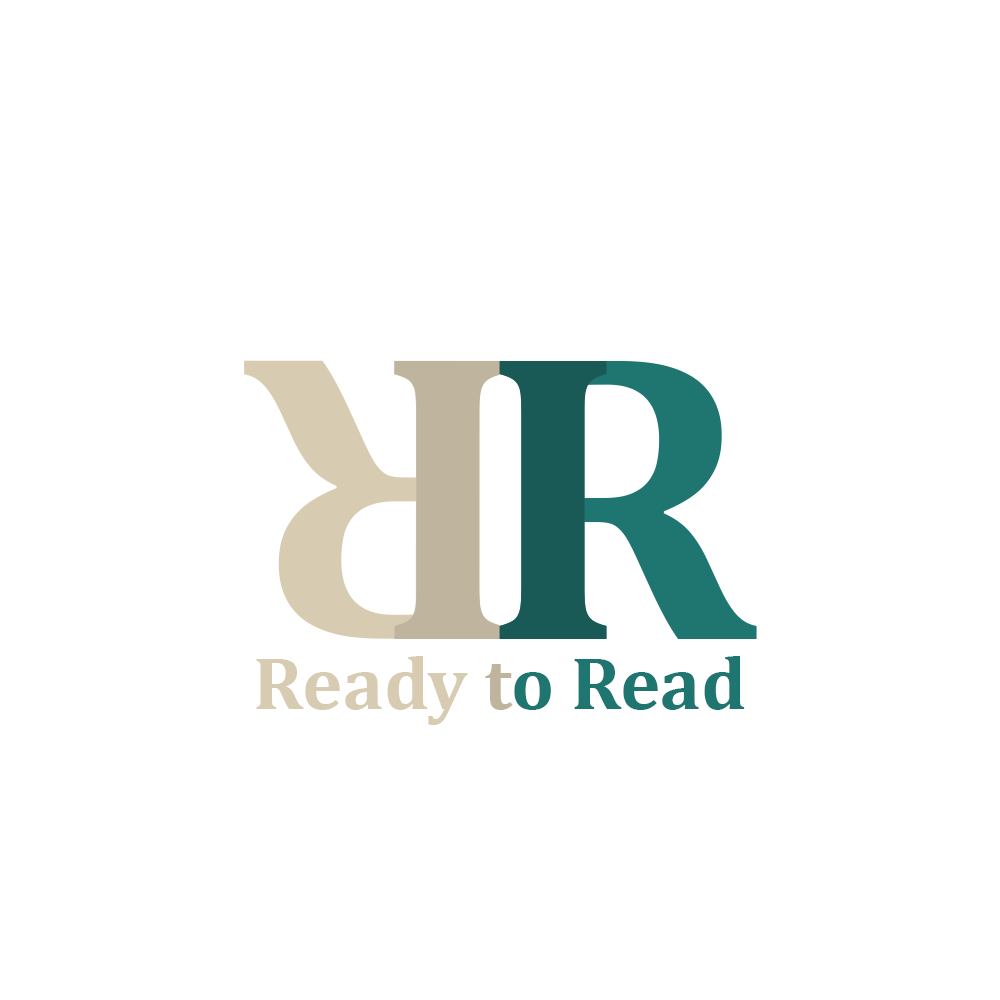
<style>
.page{position:relative;width:1000px;height:1000px;background:#ffffff}
.page>*{position:absolute;margin:0}
.t1{font:416.7px "Cambria-Bold";color:#bfb59f}
.t2{font:416.7px "Cambria-Bold";color:#195a56}
.t3{font:74.6px "Cambria-Bold";color:#1f7671}
.t4{font:74.6px "Cambria-Bold";color:#d7ccb1}
.t5{font:74.6px "Cambria-Bold";color:#bfb59f}
</style>
<div class="page">
<p class="t1" style="left:394px;top:361px;width:108px;height:278px">I</p>
<p class="t2" style="left:499px;top:361px;width:108px;height:278px">I</p>
<p class="t3" style="left:256px;top:656px;width:489px;height:69px"><span class="t4">Ready</span><span class="t5"> t</span>o Read</p>
</div>
